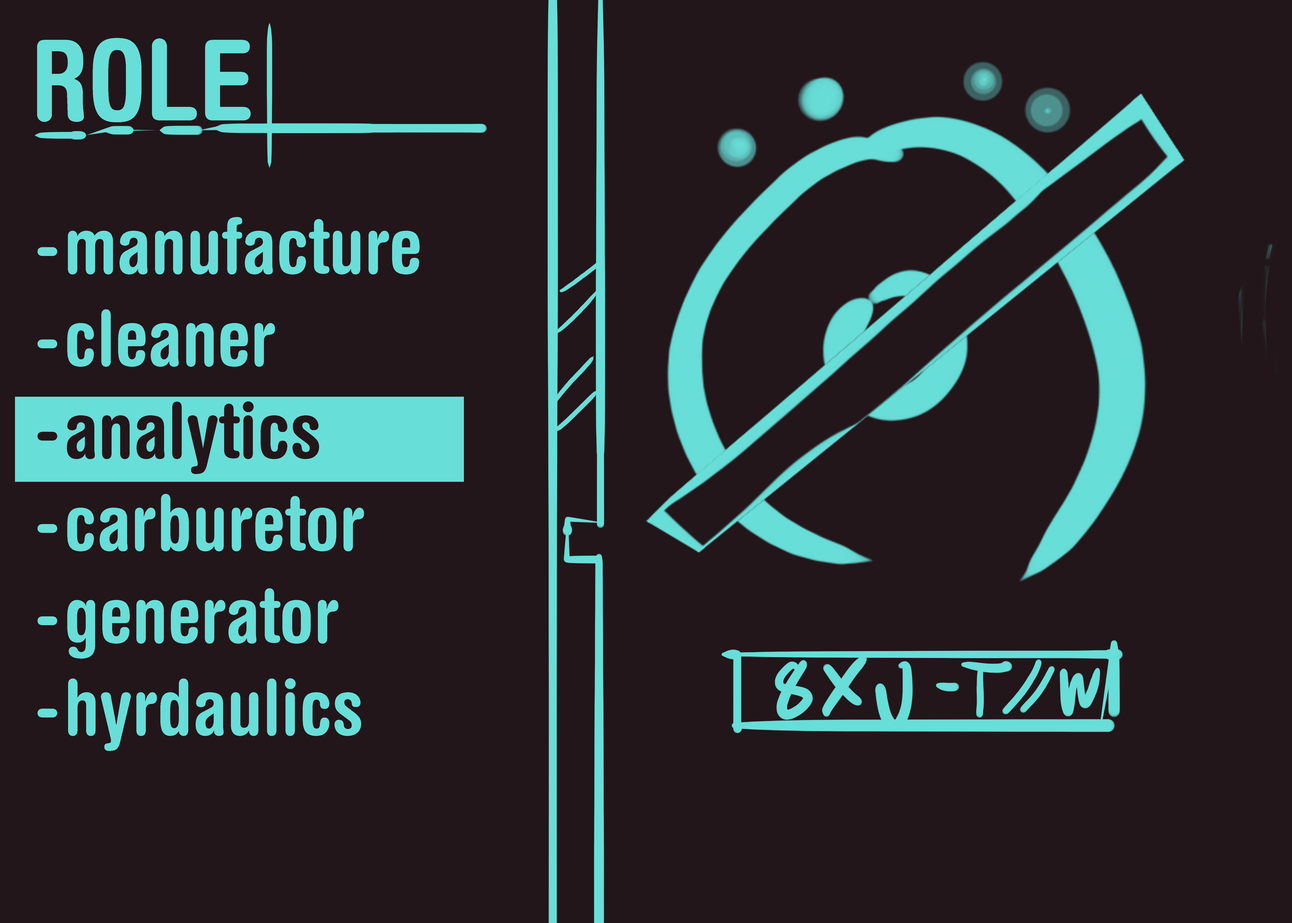
<style>
.page{position:relative;width:1292px;height:923px;background:#22161a}
.page>*{position:absolute;margin:0}
.t1{font:76.9px "HelveticaRoundedLTStd-BdCn";color:#68ded8}
.t2{font:76.9px "HelveticaRoundedLTStd-BdCn";color:#22161a}
</style>
<div class="page">
<p class="t1" style="left:38px;top:217px;width:382px;height:534px">manufacture <br>cleaner <br><span class="t2">analytics<br></span>carburetor<br>generator<br>hyrdaulics</p>
</div>
